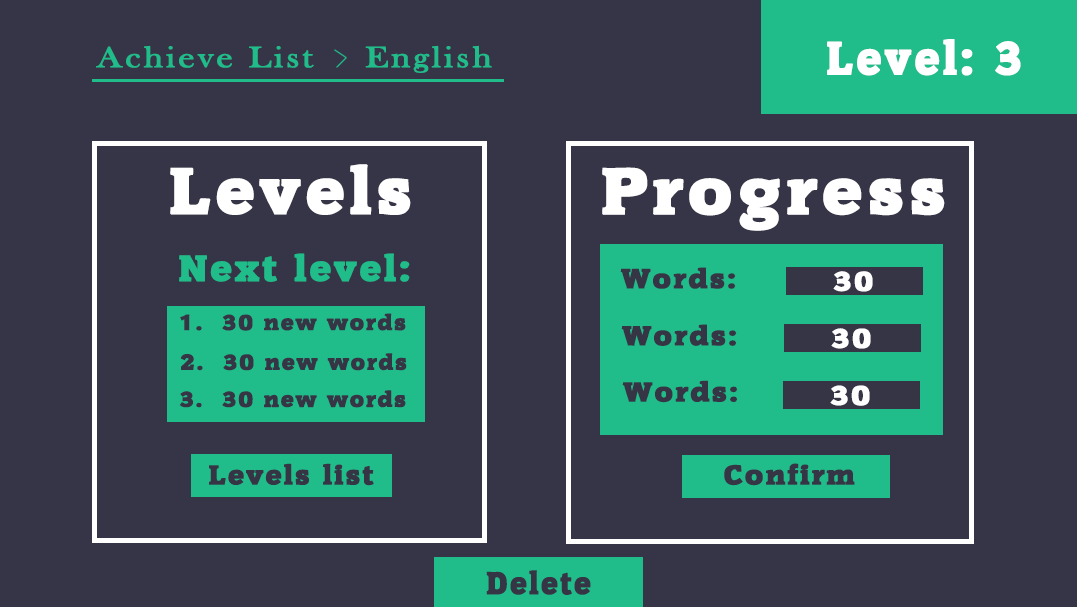
<style>
.page{position:relative;width:1077px;height:607px;background:#363547}
.page>*{position:absolute;margin:0}
.t1{font:44.7px "Commons";letter-spacing:0.07em;color:#ffffff;font-weight:bold}
.t2{font:30px "BaskOldFace";letter-spacing:0.07em;color:#20bc8a;font-weight:bold;scale:1.2 1}
.t3{font:62.1px "Commons";letter-spacing:0.07em;color:#ffffff;font-weight:bold;scale:1.11 1}
.t4{font:62.3px "Commons";letter-spacing:0.07em;color:#ffffff;font-weight:bold;scale:1.15 1}
.t5{font:34.5px "Commons";letter-spacing:0.07em;color:#20bc8a;font-weight:bold;scale:1.11 1}
.t6{font:25.9px "Commons";letter-spacing:0.07em;color:#363546;font-weight:bold;scale:1.15 1}
.t7{font:25.9px "Commons";letter-spacing:0.07em;color:#fefefe;font-weight:bold;scale:1.15 1}
.t8{font:20.7px "Commons";letter-spacing:0.07em;color:#363546;font-weight:bold;scale:1.11 1}
.t9{font:25.9px "Commons";letter-spacing:0.07em;color:#363546;font-weight:bold;scale:1.11 1}
.t10{font:30px "Commons";letter-spacing:0.07em;color:#363546;font-weight:bold}
</style>
<div class="page">
<p class="t1" style="left:827px;top:39px;width:194px;height:37px">Level: 3</p>
<p class="t2" style="left:96px;top:45px;width:396px;height:28px">Achieve List    English</p>
<p class="t3" style="left:170px;top:164px;width:241px;height:51px">Levels</p>
<p class="t4" style="left:602px;top:167px;width:343px;height:64px">Progress</p>
<p class="t5" style="left:179px;top:253px;width:231px;height:29px">Next level:</p>
<p class="t6" style="left:620px;top:267px;width:116px;height:22px">Words:</p>
<p class="t7" style="left:833px;top:271px;width:40px;height:21px">30</p>
<p class="t8" style="left:180px;top:313px;width:226px;height:18px">1.  30 new words</p>
<p class="t6" style="left:621px;top:324px;width:116px;height:22px">Words:</p>
<p class="t7" style="left:831px;top:328px;width:40px;height:21px">30</p>
<p class="t8" style="left:180px;top:353px;width:227px;height:18px">2.  30 new words</p>
<p class="t8" style="left:179px;top:390px;width:227px;height:18px">3.  30 new words</p>
<p class="t6" style="left:622px;top:380px;width:116px;height:23px">Words:</p>
<p class="t7" style="left:830px;top:385px;width:40px;height:21px">30</p>
<p class="t9" style="left:209px;top:463px;width:165px;height:23px">Levels list</p>
<p class="t6" style="left:724px;top:463px;width:131px;height:23px">Confirm</p>
<p class="t10" style="left:486px;top:570px;width:105px;height:25px">Delete</p>
</div>
